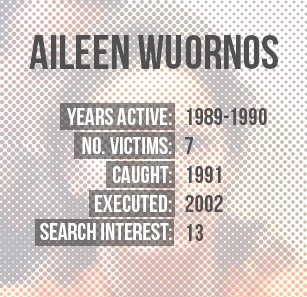
<style>
.page{position:relative;width:307px;height:297px}
.page>*{position:absolute;margin:0}
.t1{font:48px "BebasNeue";color:#505050}
.t2{font:24px "BebasNeue";color:#ffffff}
.t3{font:24px/125px "BebasNeue";color:#ffffff}
.t4{font:24px "BebasNeue";color:#505050}
.t5{font:24px/125px "BebasNeue";color:#505050}
</style>
<div class="page">
<p class="t1" style="left:29px;top:35px;width:249px;height:34px">AILEEN WUORNOS</p>
<p class="t2" style="left:40px;top:108px;width:132px;height:132px;text-align:right"><span class="t3">YEARS ACTIVE:<br></span>No. Victims:<br>cAUGHT:<br>EXECUTED:<br>SEARCH INTEREST:</p>
<p class="t4" style="left:185px;top:108px;width:82px;height:133px"><span class="t5">1989-1990<br></span>7<br>1991<br>2002<br>13</p>
</div>
